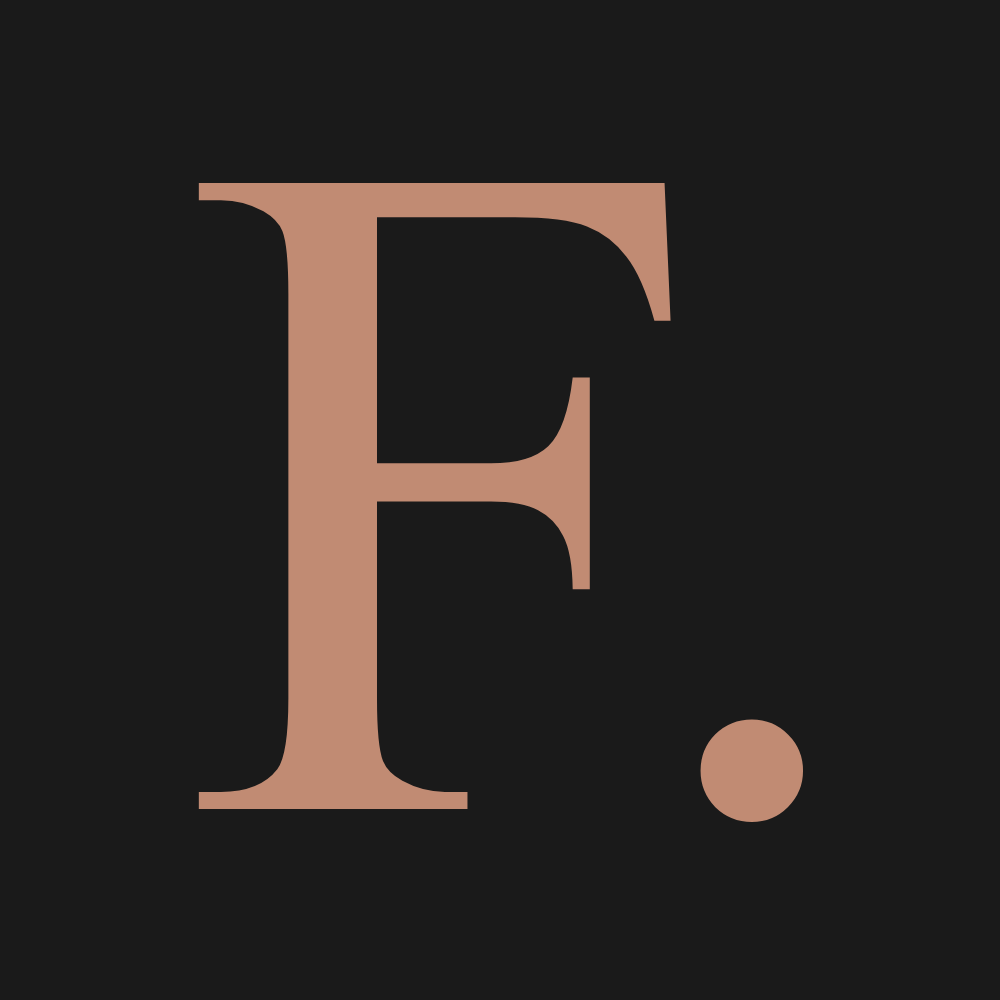
<style>
.page{position:relative;width:1000px;height:1000px;background:#1a1a1a}
.page>*{position:absolute;margin:0}
.t1{font:945.3px "TimesNewRomanPSMT";color:#c18b73}
</style>
<div class="page">
<p class="t1" style="left:198px;top:183px;width:605px;height:639px">F.</p>
</div>
